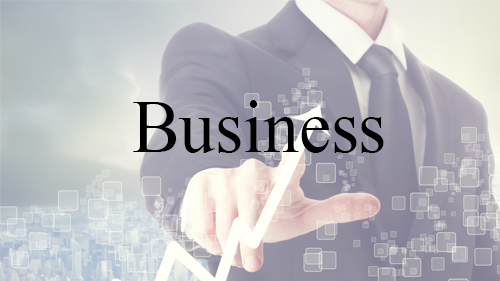
<style>
.page{position:relative;width:500px;height:281px}
.page>*{position:absolute;margin:0}
.t1{font:74.4px "TimesNewRomanPSMT";color:#000000;scale:0.96 1}
</style>
<div class="page">
<p class="t1" style="left:133px;top:100px;width:251px;height:53px">Business</p>
</div>
